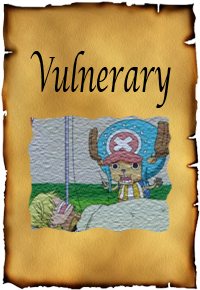
<style>
.page{position:relative;width:200px;height:290px}
.page>*{position:absolute;margin:0}
.t1{font:48px "LucidaCalligraphy-Italic";color:#000000;scale:0.52 1}
</style>
<div class="page">
<p class="t1" style="left:30px;top:51px;width:141px;height:57px">Vulnerary</p>
</div>
